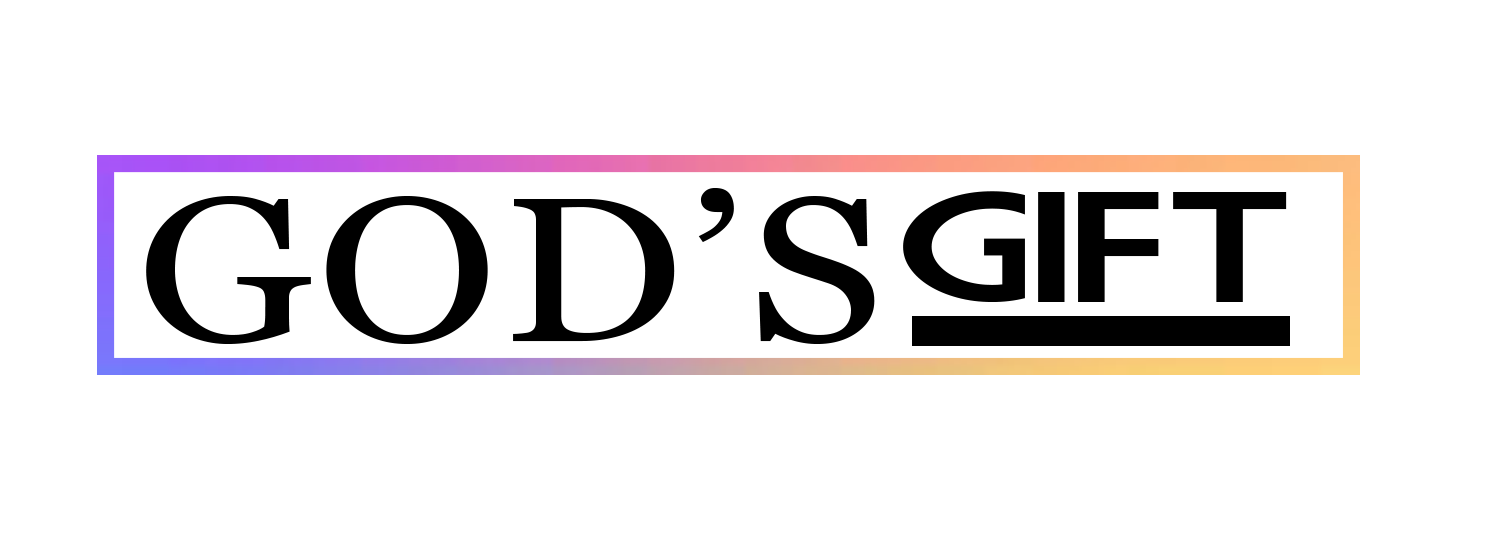
<style>
.page{position:relative;width:1500px;height:551px;background:#ffffff}
.page>*{position:absolute;margin:0}
.t1{font:205.2px "Georgia";letter-spacing:0.02em;color:#000000;scale:1.18 1}
.t2{font:153.3px "MarketDeco";letter-spacing:-0.06em;color:#000000;scale:1.57 1}
</style>
<div class="page">
<p class="t1" style="left:146px;top:188px;width:729px;height:156px">GOD’S</p>
<p class="t2" style="left:903px;top:191px;width:384px;height:111px">GIFT</p>
</div>
